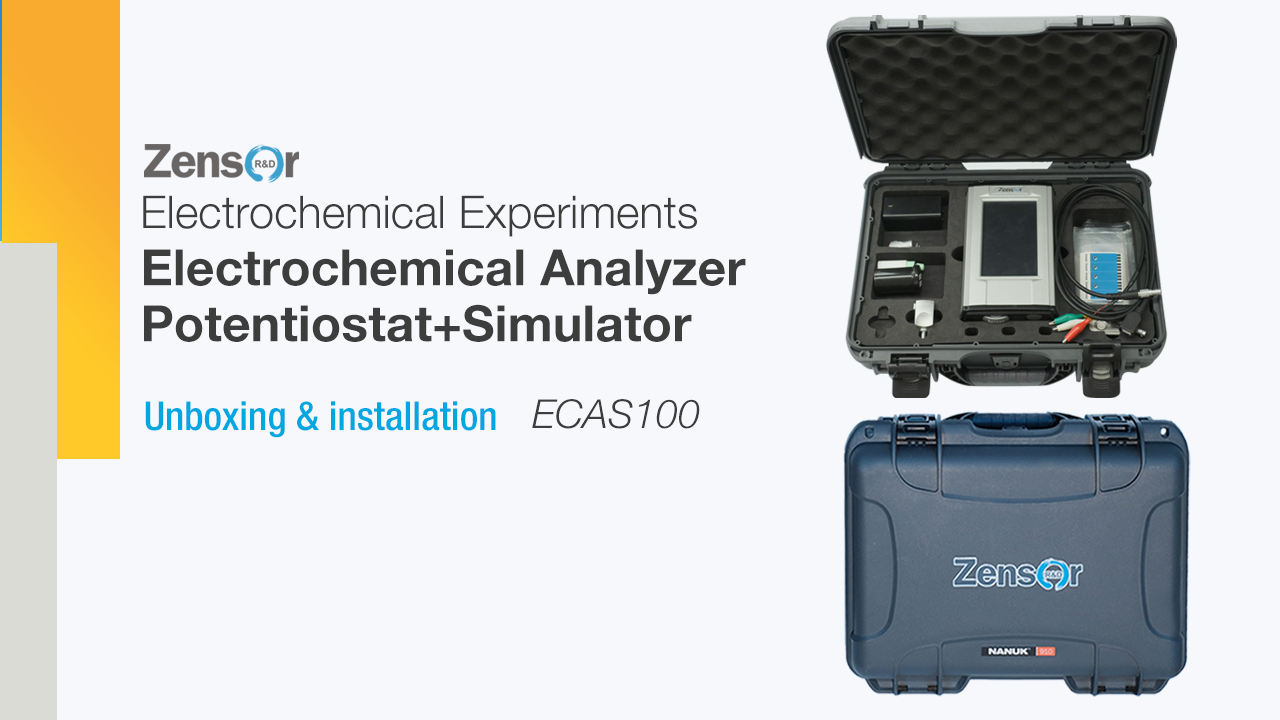
<style>
.page{position:relative;width:1280px;height:720px;background:#f7f8fc}
.page>*{position:absolute;margin:0}
.t1{font:45px "HelveticaNeueLTPro-Lt";color:#3d3d3d}
.t2{font:50px "HelveticaNeueLTPro-Bd";color:#3d3d3d}
.t3{font:40px "HelveticaNeueLTPro-MdCn";color:#00a7e1}
.t4{font:40px "HelveticaNeueLTPro-LtIt";color:#3d3d3d}
</style>
<div class="page">
<p class="t1" style="left:143px;top:195px;width:554px;height:42px">Electrochemical Experiments</p>
<p class="t2" style="left:144px;top:249px;width:602px;height:46px">Electrochemical Analyzer</p>
<p class="t2" style="left:144px;top:304px;width:548px;height:38px">Potentiostat+Simulator</p>
<p class="t3" style="left:145px;top:401px;width:351px;height:37px">Unboxing &amp; installation</p>
<p class="t4" style="left:532px;top:399px;width:168px;height:30px">ECAS100</p>
</div>
